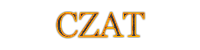
<style>
.page{position:relative;width:200px;height:50px;background:#ffffff}
.page>*{position:absolute;margin:0}
.t1{font:35.3px "Georgia"}
</style>
<div class="page">
<p class="t1" style="left:56px;top:12px;width:89px;height:26px">CZAT</p>
</div>
